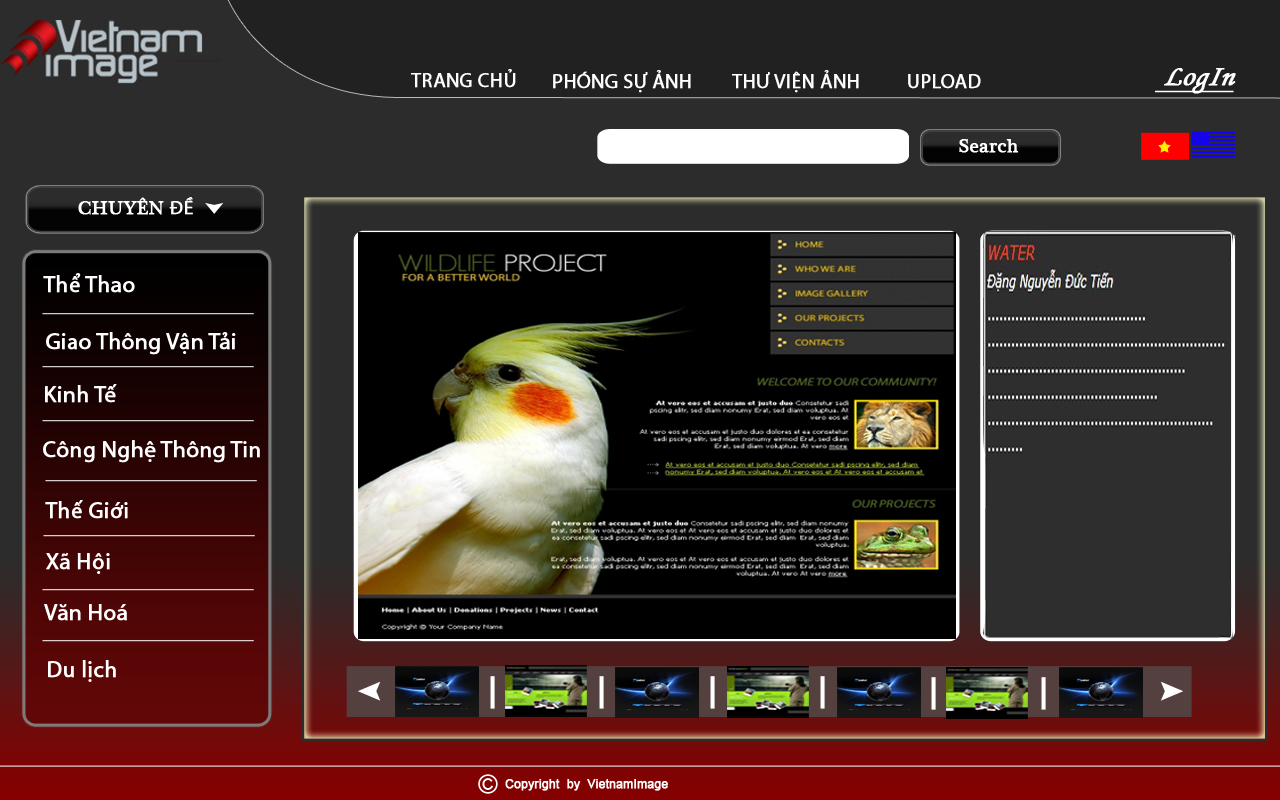
<style>
.page{position:relative;width:1280px;height:800px}
.page>*{position:absolute;margin:0}
.t1{font:20px "MyriadPro-Regular";color:#ffffff;font-weight:bold}
.t2{font:30px "MonotypeCorsiva";color:#ffffff;font-weight:bold;font-style:italic;text-decoration:underline}
.t3{font:19px "PlantagenetCherokee";color:#ffffff;font-weight:bold}
.t4{font:19px "MyriadPro-Regular";color:#ffffff;font-weight:bold}
.t5{font:22.9px "MyriadPro-Regular";color:#ffffff;font-weight:bold}
.t6{font:12px "ArialMT";color:#ffffff;font-weight:bold}
</style>
<div class="page">
<p class="t1" style="left:411px;top:69px;width:105px;height:19px">TRANG CHỦ</p>
<p class="t1" style="left:553px;top:70px;width:138px;height:23px">PHÓNG SỰ ẢNH</p>
<p class="t1" style="left:732px;top:70px;width:127px;height:23px">THƯ VIỆN ẢNH</p>
<p class="t1" style="left:908px;top:74px;width:73px;height:15px">UPLOAD</p>
<p class="t2" style="left:1155px;top:68px;width:81px;height:26px">LogIn</p>
<p class="t3" style="left:959px;top:139px;width:60px;height:14px">Search</p>
<p class="t3" style="left:78px;top:197px;width:115px;height:18px">CHUYÊN <span class="t4">ĐỀ</span></p>
<p class="t5" style="left:43px;top:273px;width:92px;height:20px">Thể Thao</p>
<p class="t5" style="left:46px;top:332px;width:190px;height:23px">Giao Thông Vận Tải</p>
<p class="t5" style="left:45px;top:384px;width:72px;height:19px">Kinh Tế</p>
<p class="t5" style="left:43px;top:440px;width:217px;height:23px">Công Nghệ Thông Tin</p>
<p class="t5" style="left:45px;top:500px;width:83px;height:19px">Thế Giới</p>
<p class="t5" style="left:46px;top:553px;width:64px;height:21px">Xã Hội</p>
<p class="t5" style="left:44px;top:604px;width:83px;height:17px">Văn Hoá</p>
<p class="t5" style="left:48px;top:660px;width:68px;height:22px">Du lịch</p>
<p class="t6" style="left:505px;top:779px;width:163px;height:12px">Copyright  by  VietnamImage</p>
</div>
